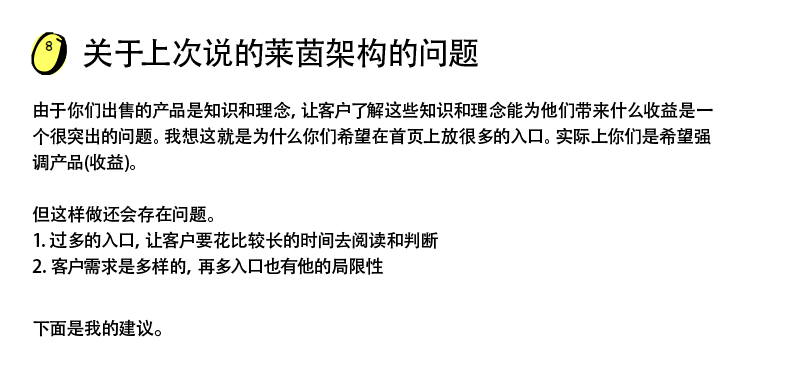
<style>
.page{position:relative;width:800px;height:386px;background:#ffffff}
.page>*{position:absolute;margin:0}
.t1{font:18px/26px "AdobeHeitiStd-Regular";color:#000000}
.t2{font:32px/36px "AdobeHeitiStd-Regular";color:#000000}
.t3{font:24px/36px "AdobeHeitiStd-Regular";color:#000000}
</style>
<div class="page">
<p class="t1" style="left:32px;top:38px;width:681px;height:299px"><span class="t2">       关于上次说的莱茵架构的问题<br></span><br>由于你们出售的产品是知识和理念，让客户了解这些知识和理念能为他们带来什么收益是一个很突出的问题。我想这就是为什么你们希望在首页上放很多的入口。实际上你们是希望强调产品(收益)。<br><br>但这样做还会存在问题。<br>1. 过多的入口，让客户要花比较长的时间去阅读和判断<br>2. 客户需求是多样的，再多入口也有他的局限性<br><br>下面是我的建议<span class="t3">。</span></p>
</div>
